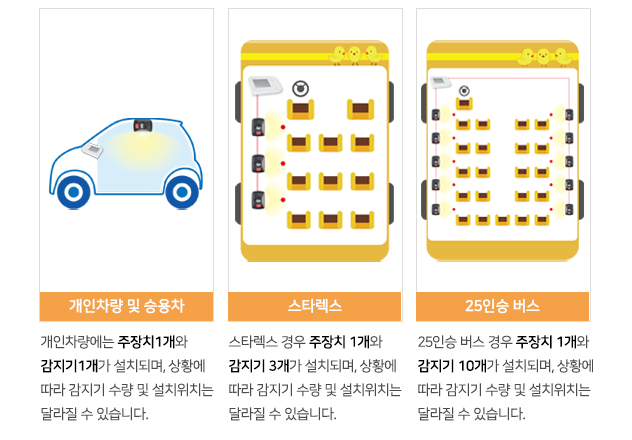
<style>
.page{position:relative;width:632px;height:440px;background:#ffffff}
.page>*{position:absolute;margin:0}
.t1{font:15px "NanumSquareB";letter-spacing:-0.03em;color:#ffffff}
.t2{font:14px/24px "NanumSquareR";letter-spacing:-0.05em;color:#4d4b4b}
.t3{font:14px/24px "NanumSquareB";letter-spacing:-0.05em;color:#000000}
.t4{font:14px/24px "NanumSquareB";letter-spacing:-0.05em;color:#010101}
</style>
<div class="page">
<p class="t1" style="left:69px;top:298px;width:116px;height:16px">개인차량 및 승용차</p>
<p class="t1" style="left:288px;top:298px;width:54px;height:15px">스타렉스</p>
<p class="t1" style="left:465px;top:298px;width:75px;height:16px">25인승 버스</p>
<p class="t2" style="left:41px;top:335px;width:173px;height:86px">개인차량에는 <span class="t3">주장치1개</span>와 <br><span class="t3">감지기1개</span>가 설치되며, 상황에 <br>따라 감지기 수량 및 설치위치는 <br>달라질 수 있습니다.</p>
<p class="t2" style="left:228px;top:335px;width:174px;height:86px">스타렉스 경우 <span class="t4">주장치 1개</span>와<br><span class="t3">감지기 3개</span>가 설치되며, 상황에<br>따라 감지기 수량 및 설치위치는<br>달라질 수 있습니다.</p>
<p class="t2" style="left:418px;top:335px;width:175px;height:86px">25인승 버스 경우 <span class="t3">주장치 1개</span>와<br><span class="t3">감지기 10개</span>가 설치되며, 상황에<br>따라 감지기 수량 및 설치위치는<br>달라질 수 있습니다.</p>
</div>
